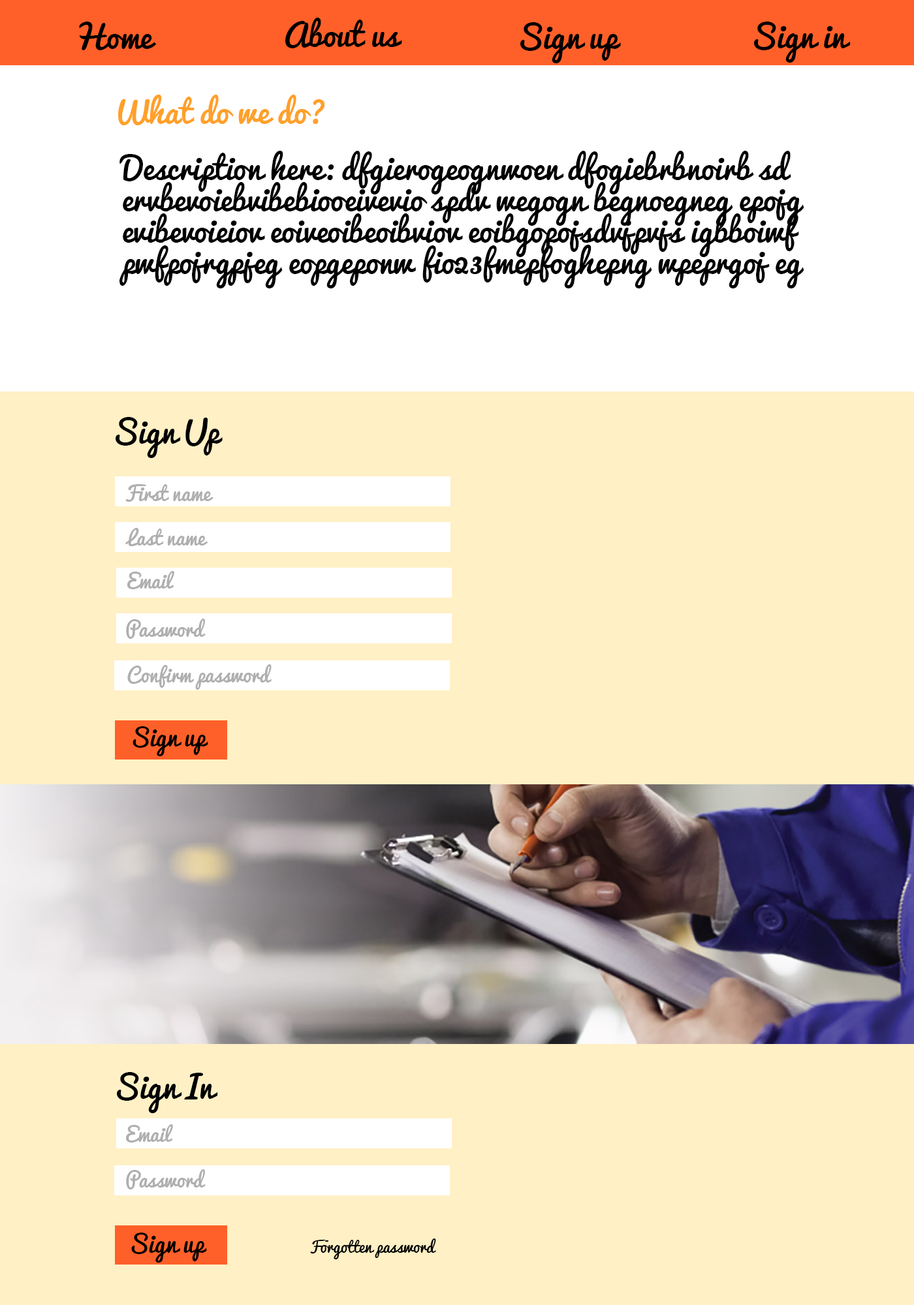
<style>
.page{position:relative;width:914px;height:1305px;background:#fff0c5}
.page>*{position:absolute;margin:0}
.t1{font:31.4px "Pacifico";color:#000000}
.t2{font:31.5px "Pacifico";color:#000000}
.t3{font:31.3px "Pacifico";color:#000000}
.t4{font:31.3px "Pacifico";color:#ffa029}
.t5{font:31.3px/31.3px "Pacifico";color:#000000}
.t6{font:19.6px "Pacifico";color:#afafaf}
.t7{font:23.5px "Pacifico";color:#000000}
.t8{font:15.7px "Pacifico";color:#000000}
</style>
<div class="page">
<p class="t1" style="left:285px;top:18px;width:117px;height:30px">About us</p>
<p class="t2" style="left:79px;top:22px;width:78px;height:28px">Home</p>
<p class="t3" style="left:520px;top:22px;width:101px;height:41px">Sign up</p>
<p class="t3" style="left:754px;top:22px;width:96px;height:41px">Sign in</p>
<p class="t4" style="left:118px;top:95px;width:207px;height:30px">What do we do?</p>
<p class="t5" style="left:119px;top:151px;width:685px;height:137px">Description here: dfgierogeognwoen dfogiebrbnoirb sd<br>ervbevoiebvibebiooeivevio spdv wegogn begnoegneg epojg<br>evibevoieiov eoiveoibeoibviov eoibgopojsdvjpvjs igbboiwf<br>pwfpojrgpjeg eopgeponw fio23fmepfoghepng wpeprgoj eg</p>
<p class="t3" style="left:116px;top:417px;width:107px;height:41px">Sign Up</p>
<p class="t6" style="left:125px;top:484px;width:88px;height:18px">First name</p>
<p class="t6" style="left:125px;top:528px;width:83px;height:18px">Last name</p>
<p class="t6" style="left:127px;top:571px;width:47px;height:18px">Email</p>
<p class="t6" style="left:126px;top:619px;width:80px;height:20px">Password</p>
<p class="t6" style="left:127px;top:664px;width:144px;height:26px">Confirm password</p>
<p class="t7" style="left:132px;top:726px;width:76px;height:30px">Sign up</p>
<p class="t3" style="left:117px;top:1072px;width:101px;height:41px">Sign In</p>
<p class="t6" style="left:126px;top:1124px;width:47px;height:19px">Email</p>
<p class="t6" style="left:126px;top:1169px;width:80px;height:21px">Password</p>
<p class="t7" style="left:131px;top:1233px;width:76px;height:30px">Sign up</p>
<p class="t8" style="left:310px;top:1239px;width:126px;height:20px">Forgotten password</p>
</div>
